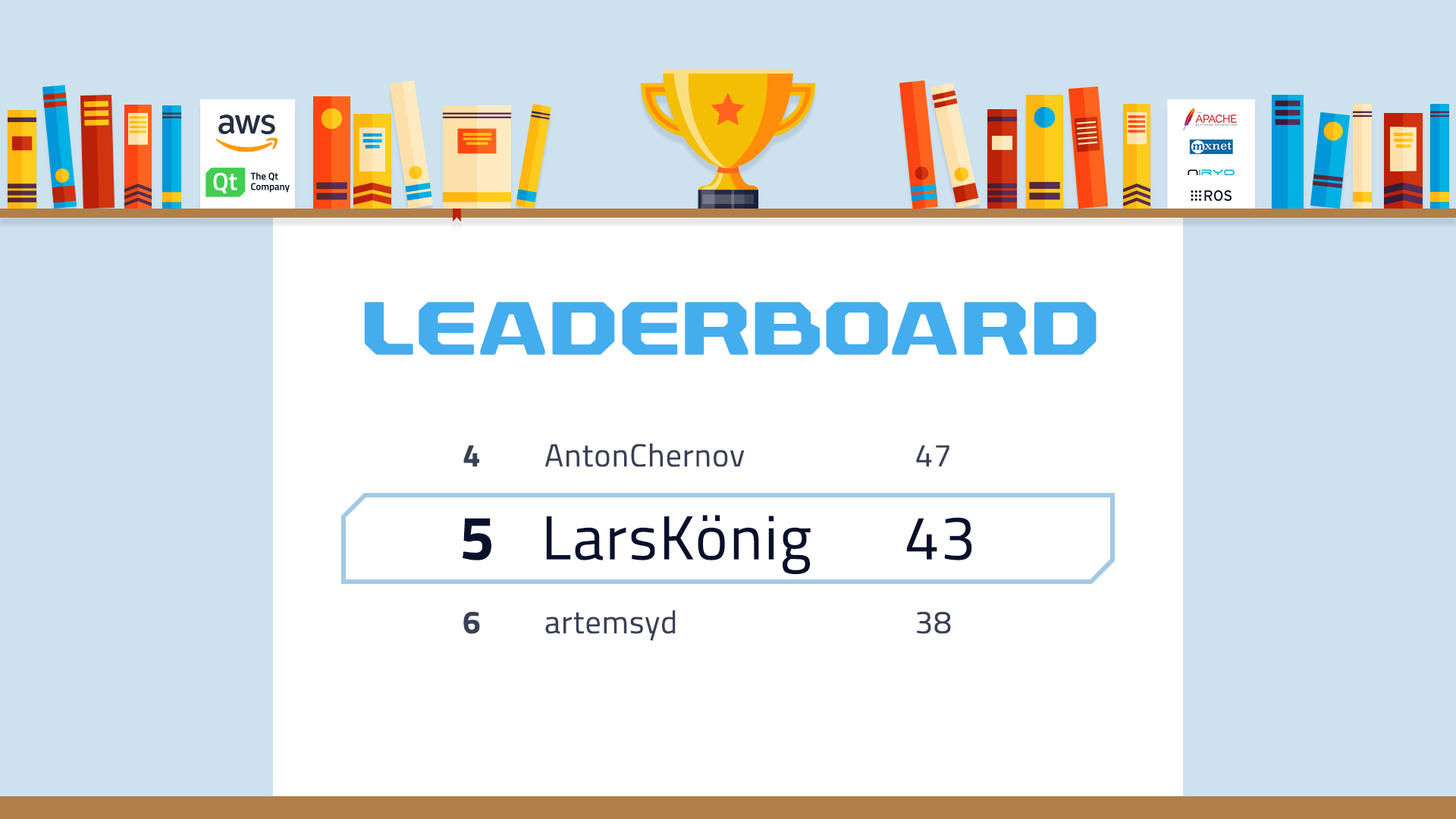
<style>
.page{position:relative;width:1456px;height:819px;background:#cde2ee}
.page>*{position:absolute;margin:0}
.t1{font:75.8px "RexliaRg-Bold";letter-spacing:0.025em;color:#43adee;text-transform:uppercase}
.t2{font:31.8px "TitilliumWeb-Regular";letter-spacing:0.025em;color:#3a4055}
.t3{font:31.8px "TitilliumWeb-Bold";letter-spacing:0.025em;color:#3a4055}
.t4{font:62.2px "TitilliumWeb-Regular";letter-spacing:0.025em;color:#09102b}
.t5{font:62.2px "TitilliumWeb-Bold";letter-spacing:0.025em;color:#09102b}
</style>
<div class="page">
<p class="t1" style="left:364px;top:302px;width:733px;height:53px">LeaderBoard</p>
<p class="t2" style="left:463px;top:443px;width:486px;height:24px"><span class="t3">4   </span>AntonChernov        47</p>
<p class="t4" style="left:463px;top:515px;width:509px;height:60px"><span class="t5">5  </span>LarsKönig      43</p>
<p class="t2" style="left:463px;top:610px;width:488px;height:31px"><span class="t3">6 </span>  artemsyd           38</p>
</div>
